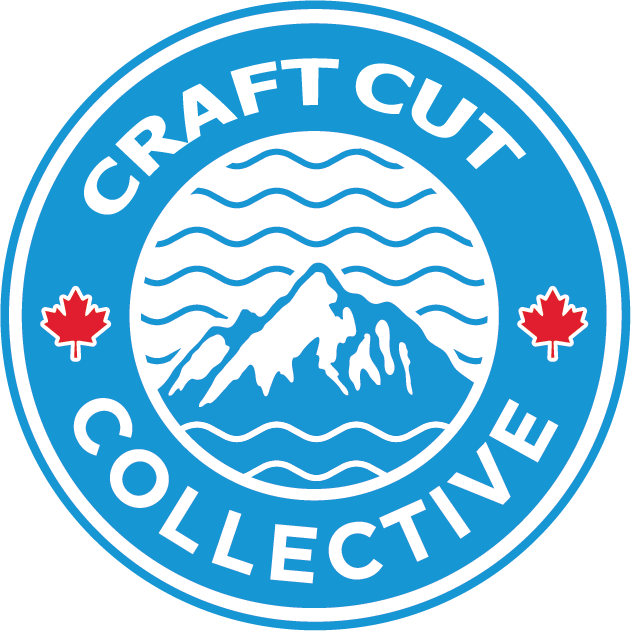
<style>
.page{position:relative;width:631px;height:631px;background:#ffffff}
.page>*{position:absolute;margin:0}
.t1{font:63.9px "Verdana-Bold";color:#ffffff}
</style>
<div class="page">
<p class="t1" style="left:84px;top:58px;width:255px;height:157px;rotate:-28deg">CRAFT</p>
<p class="t1" style="left:355px;top:63px;width:172px;height:107px;rotate:29deg">CUT</p>
</div>
